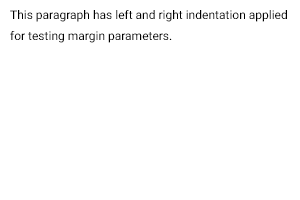
<style>
.page{position:relative;width:300px;height:200px;background:#ffffff}
.page>*{position:absolute;margin:0}
.t1{font:12px "Roboto-Regular";color:#000000}
</style>
<div class="page">
<p class="t1" style="left:10px;top:10px;width:277px;height:33px">This paragraph has left and right indentation applied for testing margin parameters.</p>
</div>
